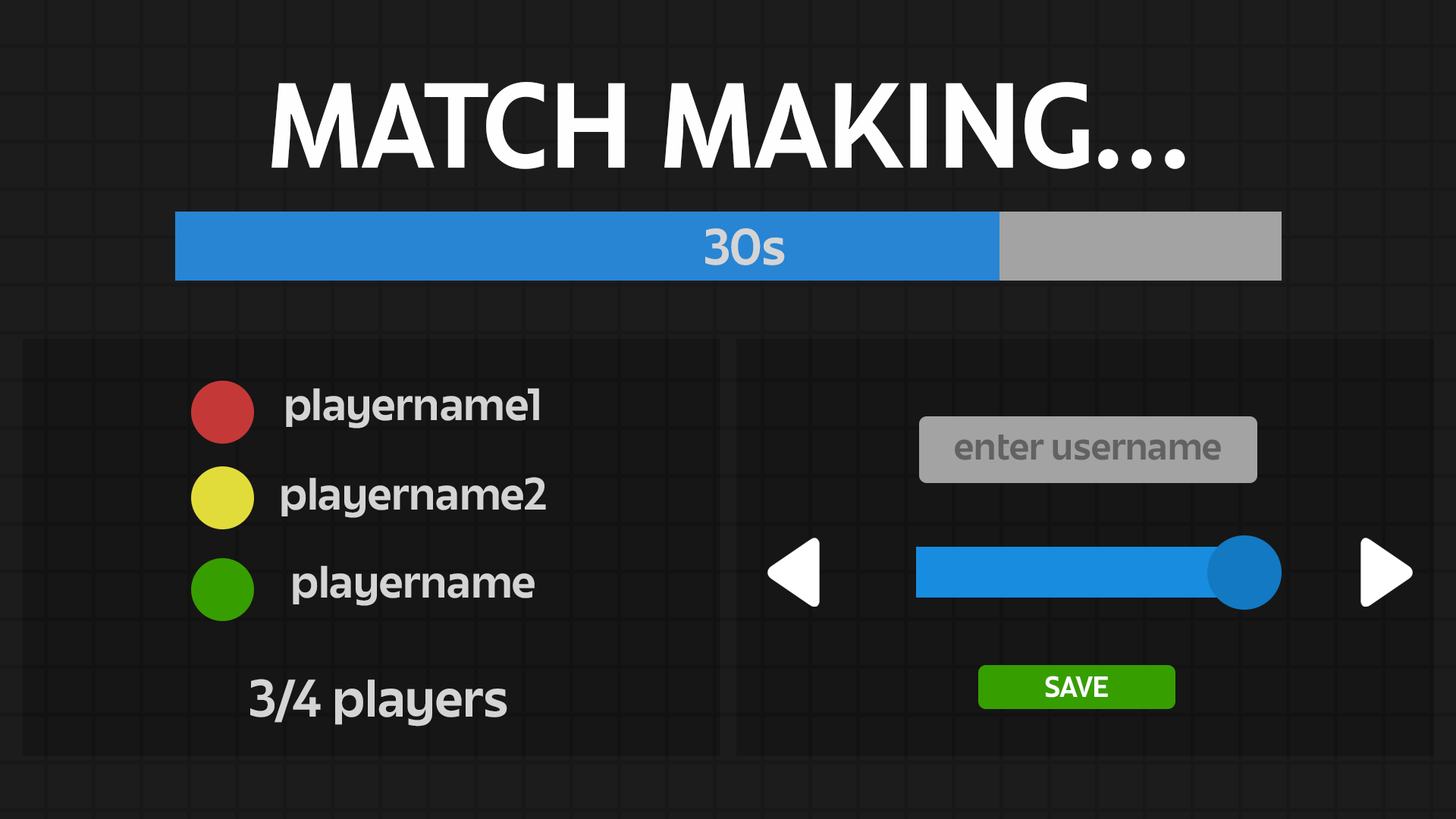
<style>
.page{position:relative;width:1456px;height:819px;background:#161616}
.page>*{position:absolute;margin:0}
.t1{font:105.4px "JuneExptVariable-Active";color:#fefefe}
.t2{font:44.8px "JuneExptVariable-Active";color:#d4d4d4}
.t3{font:39.7px "JuneExptVariable-Active";color:#d4d4d4}
.t4{font:33px "JuneExptVariable-Active";color:#626262}
.t5{font:25.6px "JuneExptVariable-Active";color:#fefefe}
.t6{font:46.1px "JuneExptVariable-Active";color:#d4d4d4}
</style>
<div class="page">
<p class="t1" style="left:271px;top:82px;width:914px;height:87px">MATCH MAKING...</p>
<p class="t2" style="left:705px;top:228px;width:80px;height:37px">30s</p>
<p class="t3" style="left:286px;top:388px;width:253px;height:40px">playername1</p>
<p class="t4" style="left:955px;top:435px;width:266px;height:25px">enter username</p>
<p class="t3" style="left:281px;top:477px;width:265px;height:41px">playername2</p>
<p class="t3" style="left:293px;top:566px;width:242px;height:40px">playername</p>
<p class="t5" style="left:1045px;top:676px;width:63px;height:22px">SAVE</p>
<p class="t6" style="left:250px;top:679px;width:257px;height:47px">3/4 players</p>
</div>
